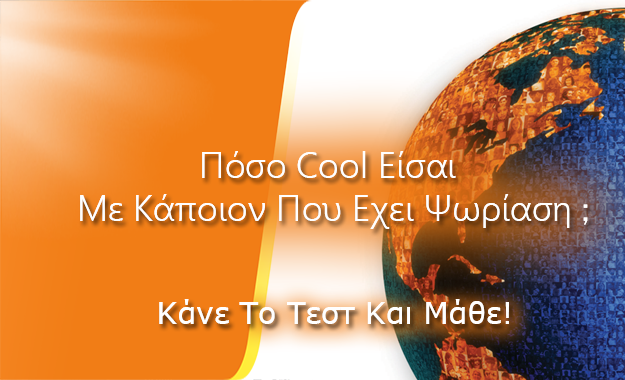
<style>
.page{position:relative;width:625px;height:380px}
.page>*{position:absolute;margin:0}
.t1{font:36px "SegoeUI-Semilight";color:#ffffff}
.t2{font:36px "MS-PGothic";color:#ffffff}
.t3{font:30px "MSReferenceSansSerif";color:#ffffff}
</style>
<div class="page">
<p class="t1" style="left:80px;top:151px;width:508px;height:78px;text-align:center">Πόσο Cool Είσαι<br> Με Κάποιον Που Εχει Ψωρίαση <span class="t2">;</span></p>
<p class="t3" style="left:159px;top:299px;width:350px;height:25px">Κάνε Το Τεστ Και Μάθε!</p>
</div>
